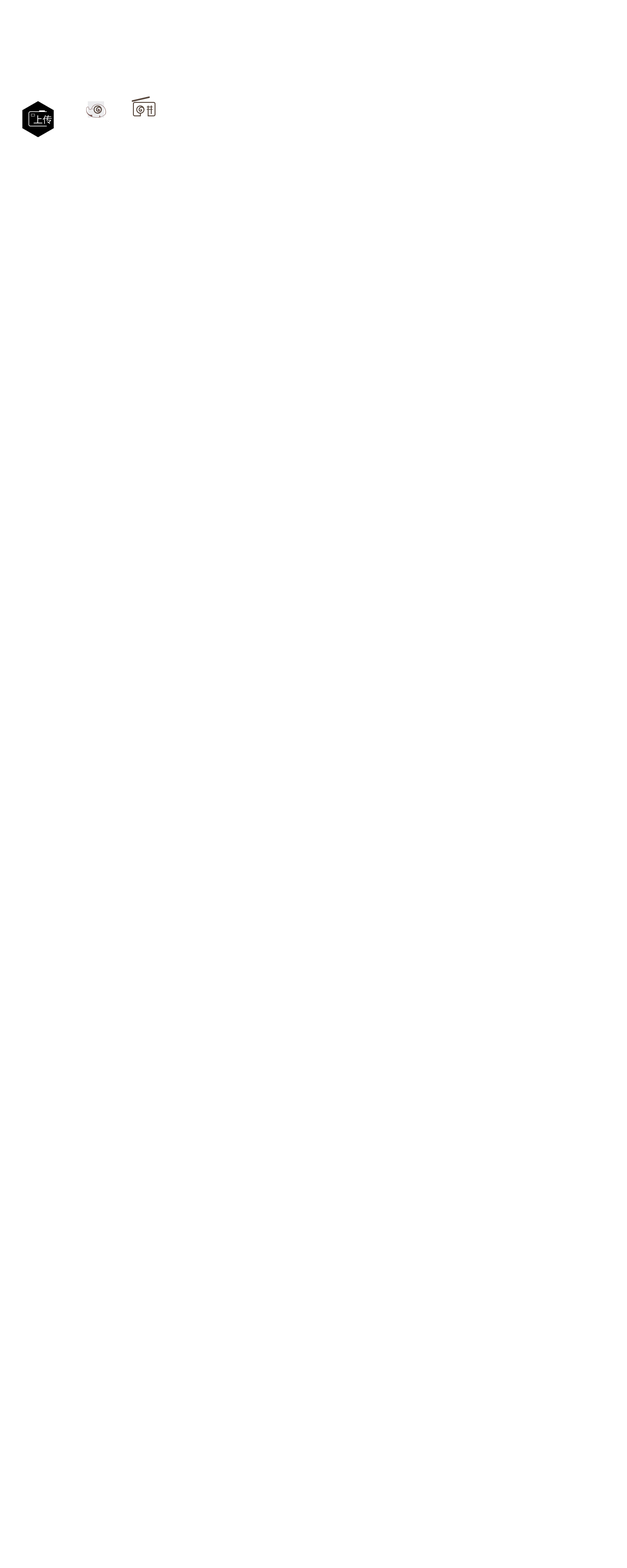
<style>
.page{position:relative;width:627px;height:1568px;background:#ffffff}
.page>*{position:absolute;margin:0}
.t1{font:9.4px "HiraginoSansGB-W3";color:#ffffff}
</style>
<div class="page">
<p class="t1" style="left:34px;top:115px;width:18px;height:9px">上传</p>
</div>
